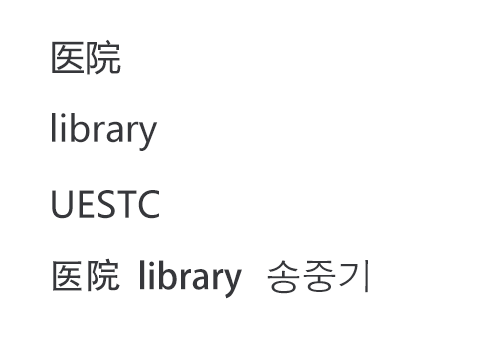
<style>
.page{position:relative;width:500px;height:340px;background:#ffffff}
.page>*{position:absolute;margin:0}
.t1{font:36px "MicrosoftYaHei";color:#36373b}
.t2{font:36px "AdobeHeitiStd-Regular";color:#36373b}
.t3{font:36px "AppleGothic";color:#36373b}
</style>
<div class="page">
<p class="t1" style="left:52px;top:39px;width:69px;height:36px">医院</p>
<p class="t1" style="left:52px;top:113px;width:106px;height:38px">library</p>
<p class="t1" style="left:52px;top:190px;width:107px;height:29px">UESTC</p>
<p class="t2" style="left:53px;top:258px;width:315px;height:41px">医院  library<span class="t3">  송중기</span></p>
</div>
